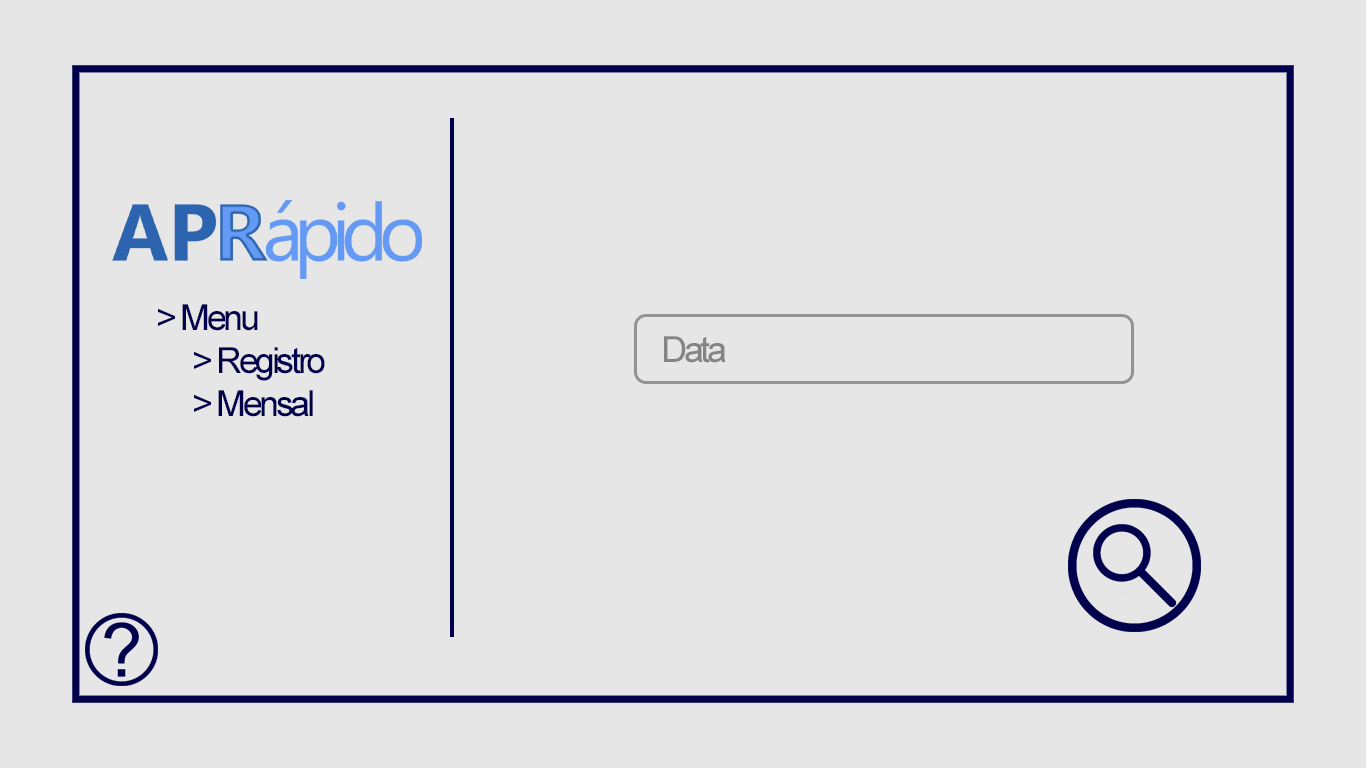
<style>
.page{position:relative;width:1366px;height:768px;background:#e6e6e6}
.page>*{position:absolute;margin:0}
.t1{font:36px "ArialMT";letter-spacing:-0.095em;color:#00004c}
.t2{font:36px "ArialMT";letter-spacing:-0.095em;color:#848484}
</style>
<div class="page">
<p class="t1" style="left:158px;top:304px;width:167px;height:113px">&gt; Menu<br> &gt; Registro<br> &gt; Mensal</p>
<p class="t2" style="left:664px;top:336px;width:62px;height:27px">Data</p>
</div>
